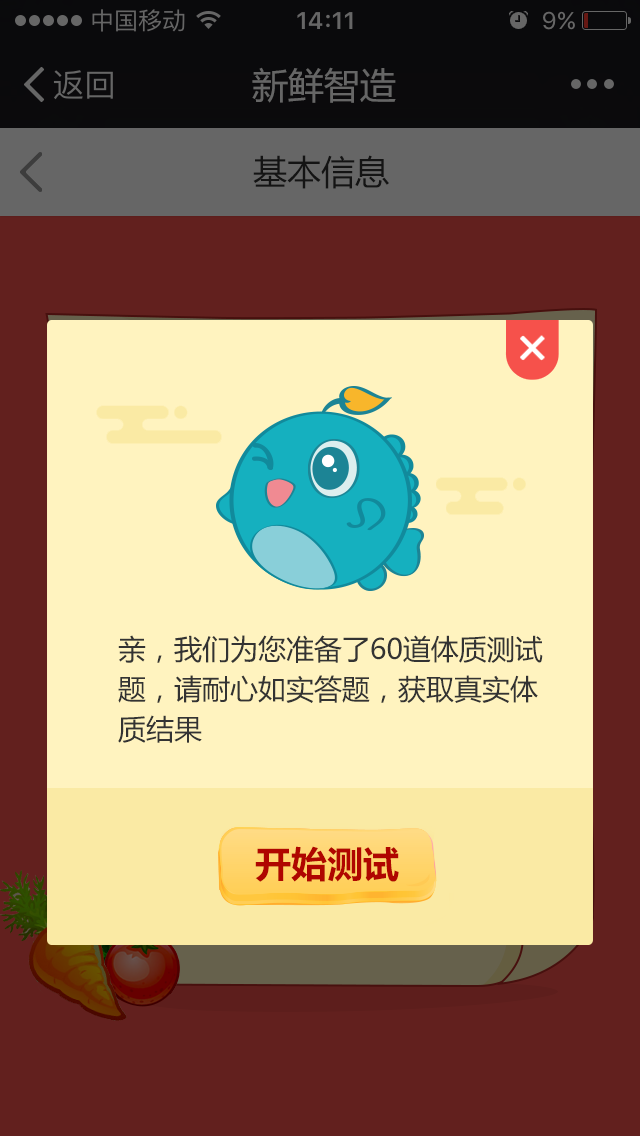
<style>
.page{position:relative;width:640px;height:1136px;background:#62201e}
.page>*{position:absolute;margin:0}
.t1{font:36px "MicrosoftYaHei";color:#666666}
.t2{font:34px "MicrosoftYaHei";color:#141414}
.t3{font:28px/40px "MicrosoftYaHei";color:#333333}
.t4{font:36px "MicrosoftYaHei-Bold";color:#b00600}
</style>
<div class="page">
<p class="t1" style="left:252px;top:67px;width:144px;height:36px">新鲜智造</p>
<p class="t2" style="left:253px;top:155px;width:136px;height:34px">基本信息</p>
<p class="t3" style="left:118px;top:635px;width:425px;height:108px">亲，我们为您准备了60道体质测试<br>题，请耐心如实答题，获取真实体<br>质结果</p>
<p class="t4" style="left:255px;top:846px;width:144px;height:36px">开始测试</p>
</div>
